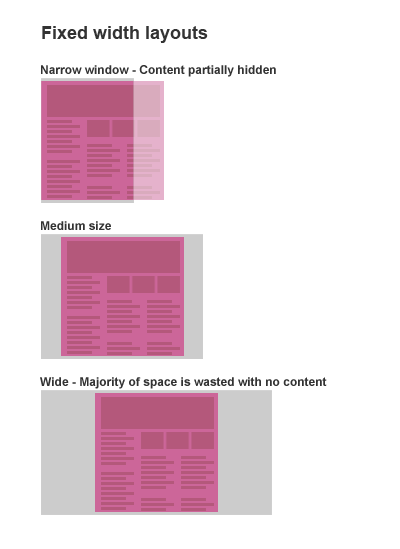
<style>
.page{position:relative;width:400px;height:549px;background:#ffffff}
.page>*{position:absolute;margin:0}
.t1{font:18px "Arial-BoldMT";color:#333333}
.t2{font:12px "Arial-BoldMT";color:#333333}
</style>
<div class="page">
<p class="t1" style="left:42px;top:26px;width:166px;height:17px">Fixed width layouts</p>
<p class="t2" style="left:41px;top:65px;width:235px;height:12px">Narrow window - Content partially hidden</p>
<p class="t2" style="left:41px;top:221px;width:70px;height:9px">Medium size</p>
<p class="t2" style="left:40px;top:377px;width:287px;height:12px">Wide - Majority of space is wasted with no content</p>
</div>
